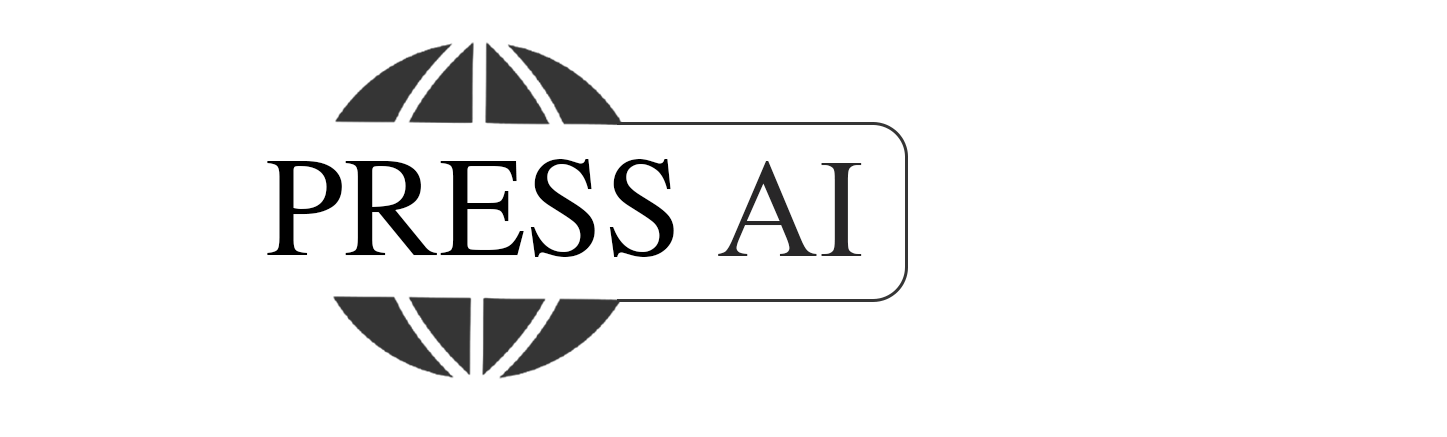
<style>
.page{position:relative;width:1447px;height:437px;background:#ffffff}
.page>*{position:absolute;margin:0}
.t1{font:142px "Times-Roman";color:#000000;text-transform:uppercase}
.t2{font:140px "TimesNewRomanPSMT";color:#282728;text-transform:uppercase}
</style>
<div class="page">
<p class="t1" style="left:267px;top:159px;width:407px;height:98px">PRESS</p>
<p class="t2" style="left:718px;top:161px;width:144px;height:95px">AI</p>
</div>
